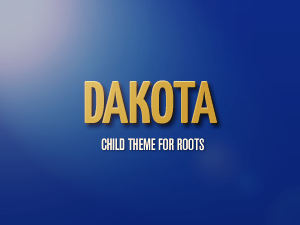
<style>
.page{position:relative;width:300px;height:225px}
.page>*{position:absolute;margin:0}
.t1{font:60px "YanoneKaffeesatz-Bold";letter-spacing:-0.01em;color:#d7ae49;text-transform:uppercase}
.t2{font:60px "YanoneKaffeesatz-Bold";letter-spacing:-0.01em;text-transform:uppercase}
.t3{font:16px "AkzidenzGroteskBQ-MdCndAlt";letter-spacing:-0.01em;color:#fdfde5;text-transform:uppercase}
</style>
<div class="page">
<p class="t1" style="left:84px;top:80px;width:133px;height:44px">DAKOTA</p>
<p class="t2" style="left:86px;top:82px;width:133px;height:44px">DAKOTA</p>
<p class="t3" style="left:101px;top:138px;width:103px;height:13px">CHILd THEME FOr ROOTS</p>
</div>
